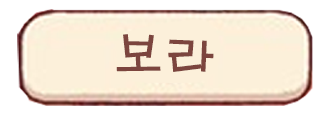
<style>
.page{position:relative;width:330px;height:115px;background:#ffffff}
.page>*{position:absolute;margin:0}
.t1{font:53.3px "H2porM";letter-spacing:-0.01em;color:#7c453e}
</style>
<div class="page">
<p class="t1" style="left:116px;top:34px;width:98px;height:38px">보라</p>
</div>
